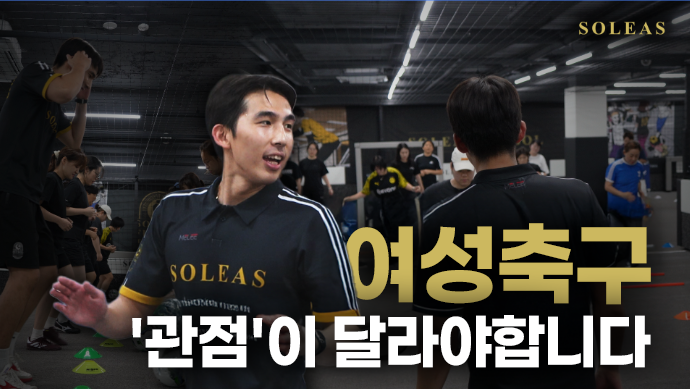
<style>
.page{position:relative;width:690px;height:389px}
.page>*{position:absolute;margin:0}
.t1{font:89px "Paperlogy-8ExtraBold";color:#ccb85f}
.t2{font:60.3px "Paperlogy-8ExtraBold";color:#ffffff}
</style>
<div class="page">
<p class="t1" style="left:344px;top:223px;width:307px;height:82px">여성축구</p>
<p class="t2" style="left:132px;top:315px;width:519px;height:53px">'관점'이 달라야합니다</p>
</div>
